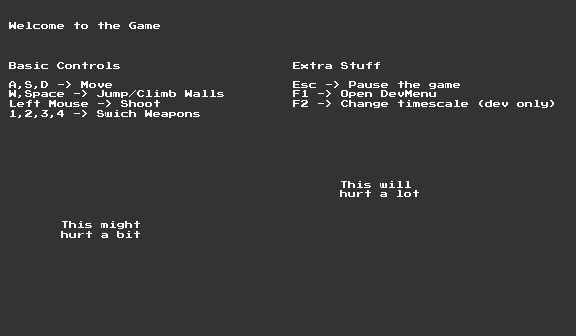
<style>
.page{position:relative;width:576px;height:336px;background:#333333}
.page>*{position:absolute;margin:0}
.t1{font:8px "PressStart2P";color:#ffffff}
</style>
<div class="page">
<p class="t1" style="left:9px;top:22px;width:151px;height:7px">Welcome to the Game</p>
<p class="t1" style="left:9px;top:62px;width:215px;height:56px">Basic Controls<br><br>A,S,D -&gt; Move<br>W,Space -&gt; Jump/Climb Walls<br>Left Mouse -&gt; Shoot<br>1,2,3,4 -&gt; Swich Weapons</p>
<p class="t1" style="left:293px;top:62px;width:261px;height:46px">Extra Stuff<br><br>Esc -&gt; Pause the game<br>F1 -&gt; Open DevMenu<br>F2 -&gt; Change timescale (dev only)</p>
<p class="t1" style="left:340px;top:181px;width:79px;height:16px">This will<br>hurt a lot</p>
<p class="t1" style="left:61px;top:221px;width:79px;height:17px">This might<br>hurt a bit</p>
</div>
